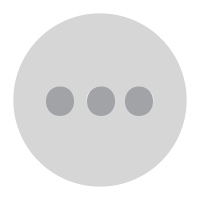
<style>
.page{position:relative;width:200px;height:200px;background:#d6d6d6}
.page>*{position:absolute;margin:0}
.t1{font:329.1px "MyriadArabic-Regular";color:#a1a3a7}
</style>
<div class="page">
<p class="t1" style="left:46px;top:86px;width:28px;height:30px">.</p>
<p class="t1" style="left:87px;top:86px;width:28px;height:30px">.</p>
<p class="t1" style="left:125px;top:86px;width:28px;height:30px">.</p>
</div>
